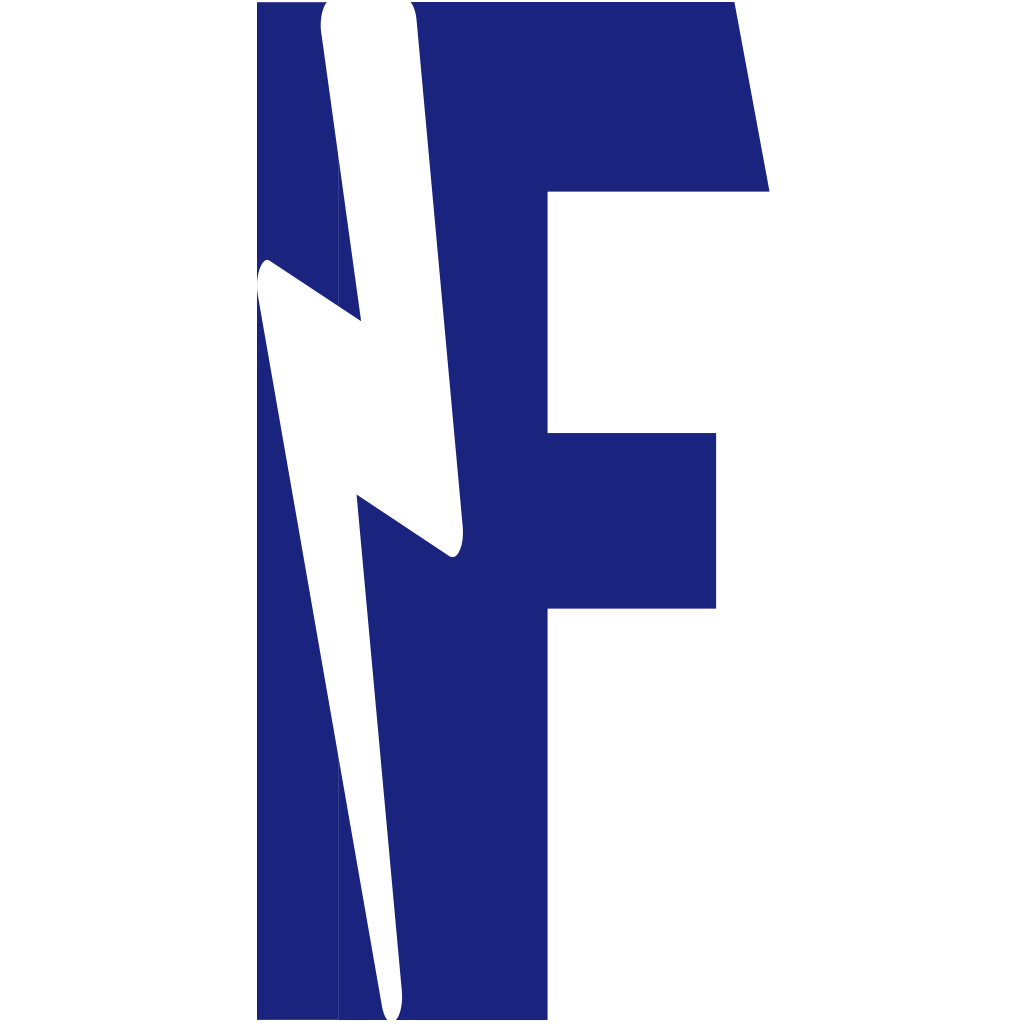
<style>
.page{position:relative;width:1024px;height:1024px;background:#ffffff}
.page>*{position:absolute;margin:0}
.t1{font:1403.8px "AmericanCaptain";color:#1a237e}
</style>
<div class="page">
<p class="t1" style="left:338px;top:2px;width:432px;height:1018px">F</p>
</div>
